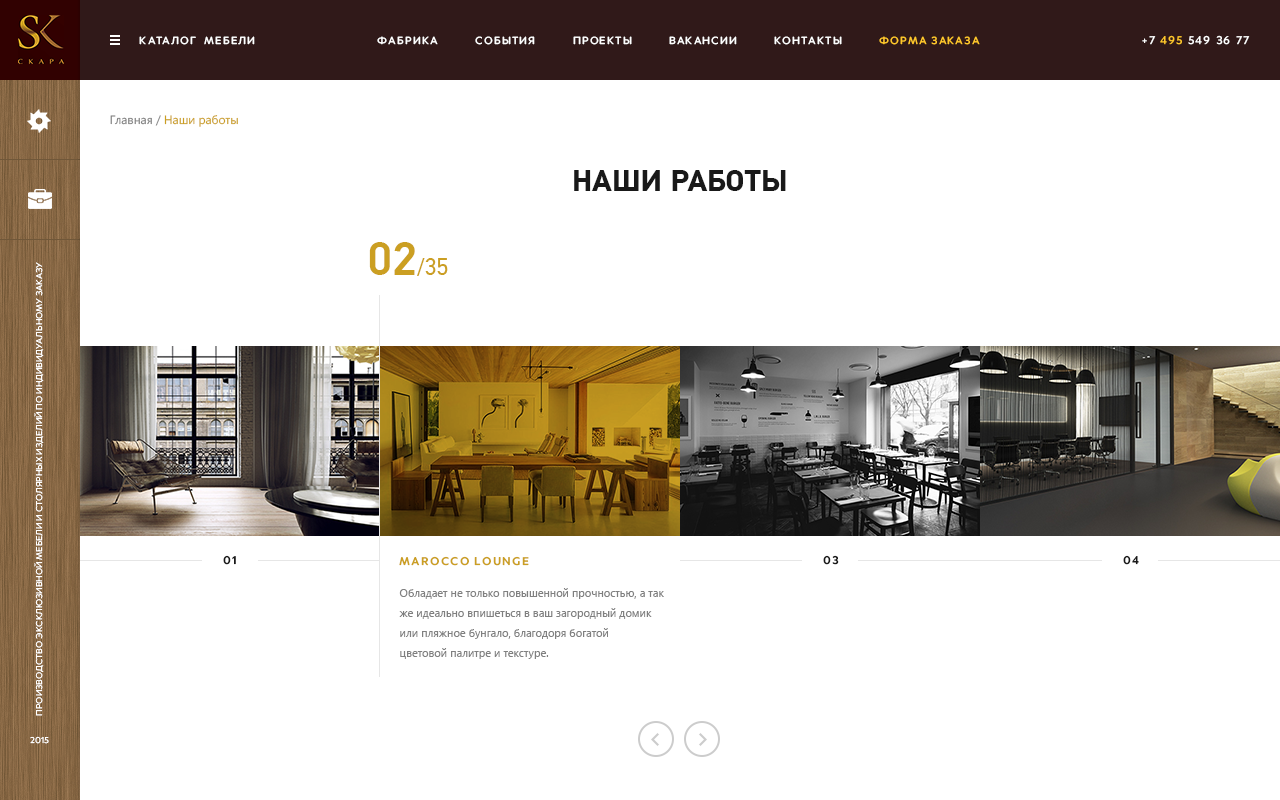
<style>
.page{position:relative;width:1280px;height:800px;background:#ffffff}
.page>*{position:absolute;margin:0}
.t1{font:11px "Merel-Medium";letter-spacing:0.1em;color:#ffffff;text-transform:uppercase}
.t2{font:11px "Merel-Medium";letter-spacing:0.1em;color:#ffc72b;text-transform:uppercase}
.t3{font:12px "Merel-Medium";letter-spacing:0.1em;color:#ffffff;text-transform:uppercase}
.t4{font:12px "Merel-Medium";letter-spacing:0.1em;color:#ffc72b;text-transform:uppercase}
.t5{font:12px "SegoeUI";color:#cb9f22}
.t6{font:12px "SegoeUI";color:#808080}
.t7{font:30px "PFDinTextPro-Bold";color:#191919;text-transform:uppercase}
.t8{font:24px "PFDinTextPro-Regular";color:#cb9f22;text-transform:uppercase}
.t9{font:48px "PFDinTextPro-Medium";color:#cb9f22;text-transform:uppercase}
.t10{font:9px "Merel-Regular";color:#ffffff;text-transform:uppercase}
.t11{font:12px "Merel-Bold";letter-spacing:0.1em;color:#191919;text-transform:uppercase}
.t12{font:12px "Merel-Bold";letter-spacing:0.1em;color:#cb9f22;text-transform:uppercase}
.t13{font:11px/20px "SegoeUI";color:#808080}
</style>
<div class="page">
<p class="t1" style="left:139px;top:36px;width:116px;height:9px">каталог  мебели</p>
<p class="t1" style="left:377px;top:36px;width:603px;height:9px">фабрика          события          проекты          вакансии          контакты<span class="t2">          форма заказа</span></p>
<p class="t3" style="left:1142px;top:35px;width:108px;height:10px">+7 <span class="t4">495</span> 549 36 77</p>
<p class="t5" style="left:110px;top:115px;width:128px;height:12px"><span class="t6">Главная / </span>Наши работы</p>
<p class="t7" style="left:574px;top:170px;width:212px;height:21px">Наши работы</p>
<p class="t8" style="left:369px;top:242px;width:79px;height:34px"><span class="t9">02</span>/35</p>
<p class="t10" style="left:34px;top:262px;width:10px;height:454px;rotate:-90deg">производство эксклюзивной мебели и столярных изделий по индивидуальному заказу</p>
<p class="t11" style="left:223px;top:555px;width:13px;height:10px">01</p>
<p class="t12" style="left:399px;top:556px;width:130px;height:10px">Marocco lounge</p>
<p class="t11" style="left:823px;top:555px;width:16px;height:10px">03</p>
<p class="t11" style="left:1123px;top:555px;width:16px;height:10px">04</p>
<p class="t13" style="left:399px;top:588px;width:265px;height:71px">Обладает не только повышенной прочностью, а так <br>же идеально впишеться в ваш загородный домик <br>или пляжное бунгало, благодоря богатой<br>цветовой палитре и текстуре.</p>
<p class="t10" style="left:30px;top:736px;width:19px;height:8px">2015</p>
</div>
